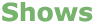
<style>
.page{position:relative;width:94px;height:23px;background:#ffffff}
.page>*{position:absolute;margin:0}
.t1{font:25px "Verdana-Bold";color:#78b36d}
</style>
<div class="page">
<p class="t1" style="left:2px;top:2px;width:91px;height:20px">Shows</p>
</div>
